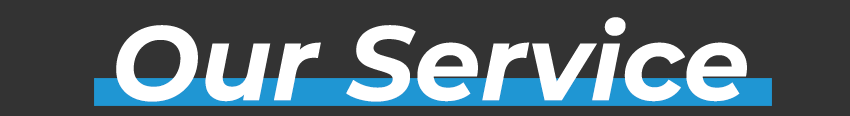
<style>
.page{position:relative;width:850px;height:116px;background:#333333}
.page>*{position:absolute;margin:0}
.t1{font:105.2px "Montserrat-BoldItalic";color:#ffffff}
</style>
<div class="page">
<p class="t1" style="left:116px;top:17px;width:631px;height:85px">Our Service</p>
</div>
